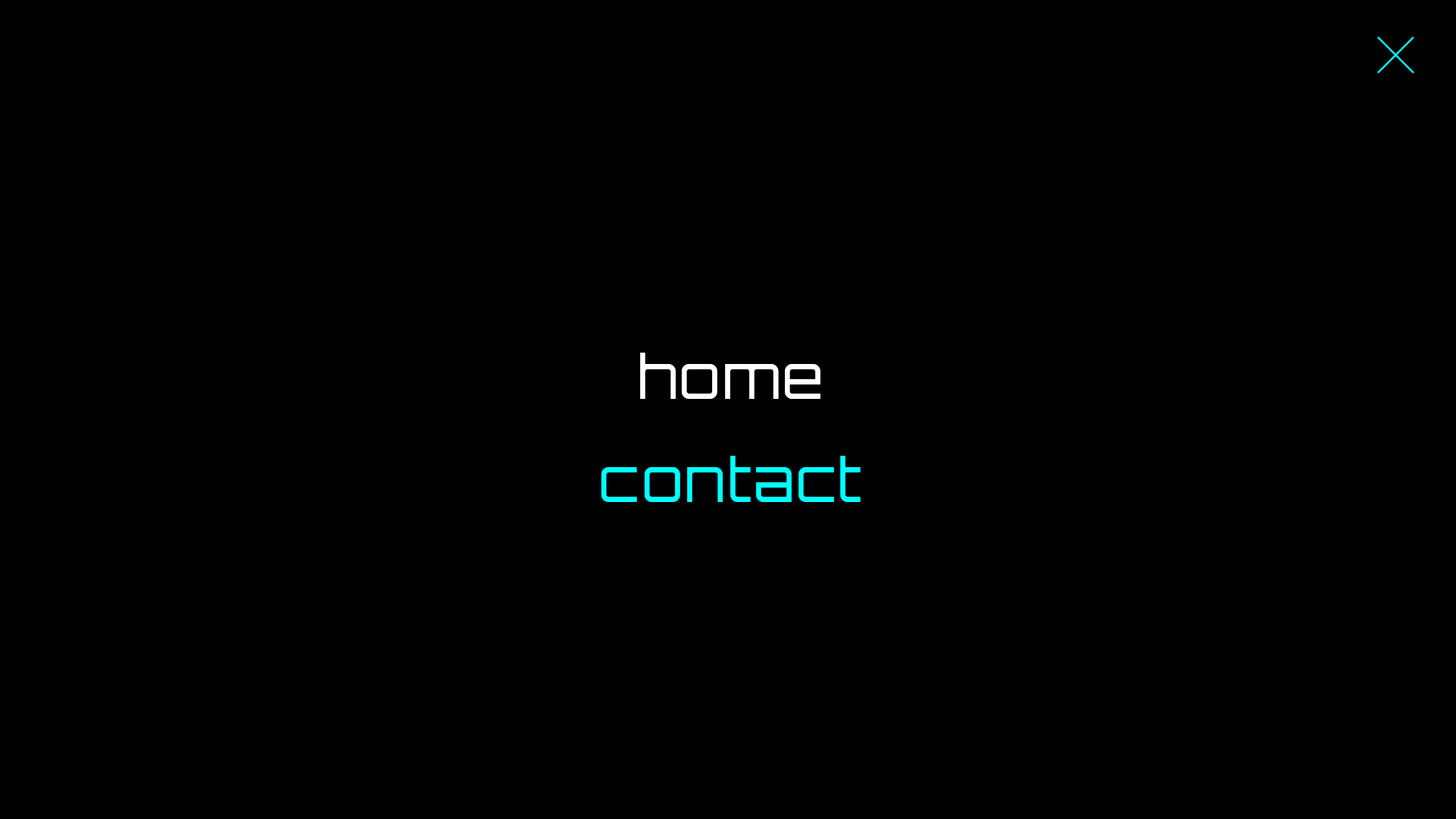
<style>
.page{position:relative;width:1456px;height:819px;background:#000000}
.page>*{position:absolute;margin:0}
.t1{font:59.6px "Orbitron-Regular";letter-spacing:0.03em;color:#ffffff}
.t2{font:59.6px "Orbitron-Regular";letter-spacing:0.03em;color:#00ffff}
</style>
<div class="page">
<p class="t1" style="left:640px;top:353px;width:181px;height:46px">home</p>
<p class="t2" style="left:601px;top:456px;width:260px;height:46px">contact</p>
</div>
